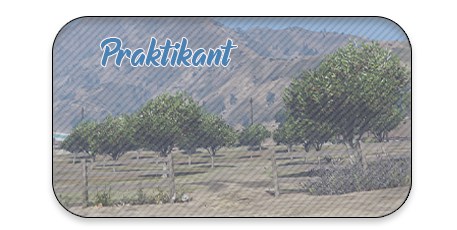
<style>
.page{position:relative;width:457px;height:230px;background:#ffffff}
.page>*{position:absolute;margin:0}
.t1{font:39.6px "RaphtaliaDEMO";color:#4a83b3}
</style>
<div class="page">
<p class="t1" style="left:100px;top:37px;width:137px;height:30px">Praktikant</p>
</div>
